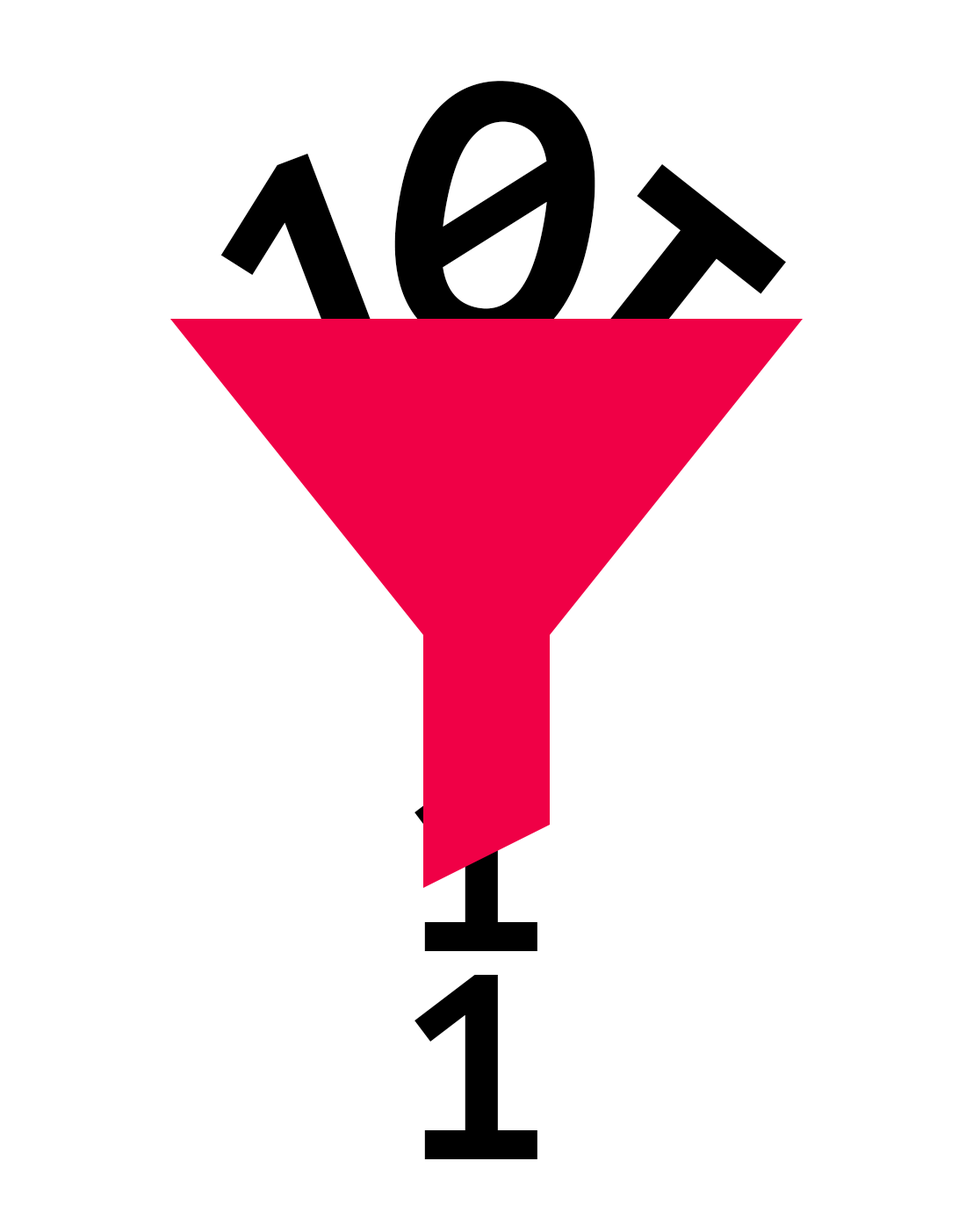
<style>
.page{position:relative;width:973px;height:1226px;background:#ffffff}
.page>*{position:absolute;margin:0}
.t1{font:370px "PTMono-Bold";color:#000000}
.t2{font:370px "PTMono-Bold"}
.t3{font:263.4px "PTMono-Bold"}
.t4{font:263.4px "PTMono-Bold";color:#000000}
</style>
<div class="page">
<p class="t1" style="left:394px;top:81px;width:201px;height:268px;rotate:10deg">0</p>
<p class="t2" style="left:220px;top:153px;width:231px;height:279px;rotate:-21deg">1</p>
<p class="t2" style="left:544px;top:163px;width:242px;height:261px;rotate:-142deg">1</p>
<p class="t3" style="left:414px;top:767px;width:123px;height:184px">1</p>
<p class="t4" style="left:414px;top:975px;width:123px;height:184px">1</p>
</div>
